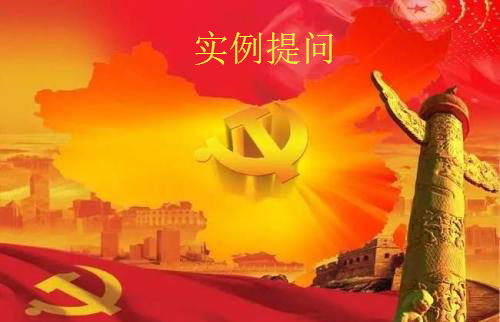
<style>
.page{position:relative;width:500px;height:322px}
.page>*{position:absolute;margin:0}
.t1{font:36px "SimSun";color:#f0ee43}
</style>
<div class="page">
<p class="t1" style="left:195px;top:31px;width:138px;height:34px">实例提问</p>
</div>
